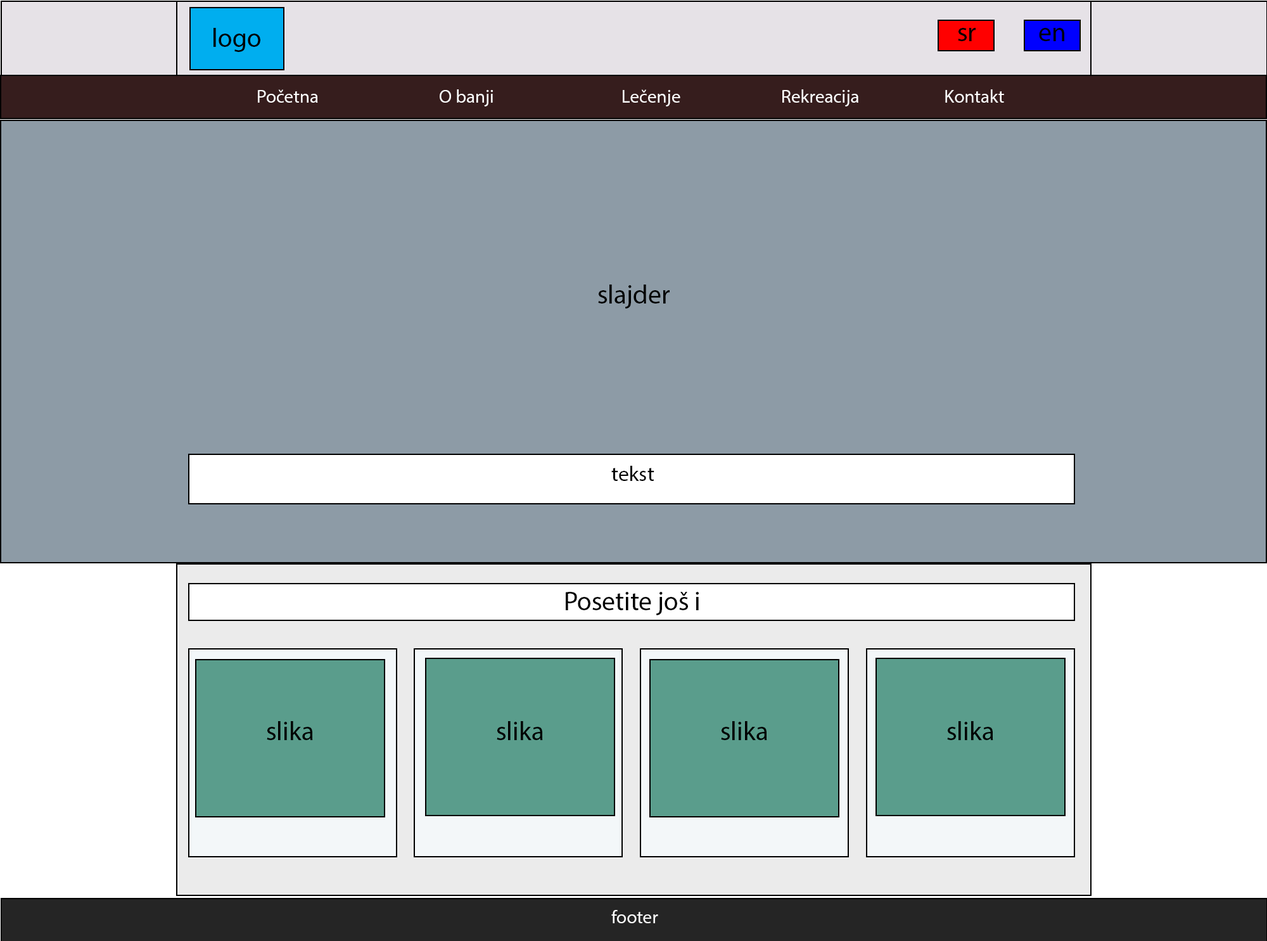
<style>
.page{position:relative;width:1267px;height:941px;background:#8d9ba6}
.page>*{position:absolute;margin:0}
.t1{font:26.4px "MyriadPro-Regular";color:#000101}
.t2{font:18.5px "MyriadPro-Regular";color:#ffffff}
.t3{font:26.4px "MyriadPro-Regular";color:#000000}
.t4{font:21.1px "MyriadPro-Regular";color:#000000}
</style>
<div class="page">
<p class="t1" style="left:214px;top:28px;width:46px;height:24px">logo</p>
<p class="t1" style="left:958px;top:28px;width:18px;height:13px">sr</p>
<p class="t1" style="left:1039px;top:28px;width:26px;height:13px">en</p>
<p class="t2" style="left:258px;top:89px;width:746px;height:17px"><span class="t1">   </span>Početna      O banji      Lečenje     Rekreacija Kontakt</p>
<p class="t3" style="left:598px;top:285px;width:72px;height:24px">slajder</p>
<p class="t4" style="left:611px;top:466px;width:44px;height:15px">tekst</p>
<p class="t3" style="left:566px;top:592px;width:133px;height:23px">Posetite još i</p>
<p class="t3" style="left:267px;top:721px;width:46px;height:19px">slika</p>
<p class="t3" style="left:497px;top:721px;width:46px;height:19px">slika</p>
<p class="t3" style="left:721px;top:721px;width:46px;height:19px">slika</p>
<p class="t3" style="left:947px;top:721px;width:47px;height:19px">slika</p>
<p class="t2" style="left:611px;top:910px;width:47px;height:13px">footer</p>
</div>
